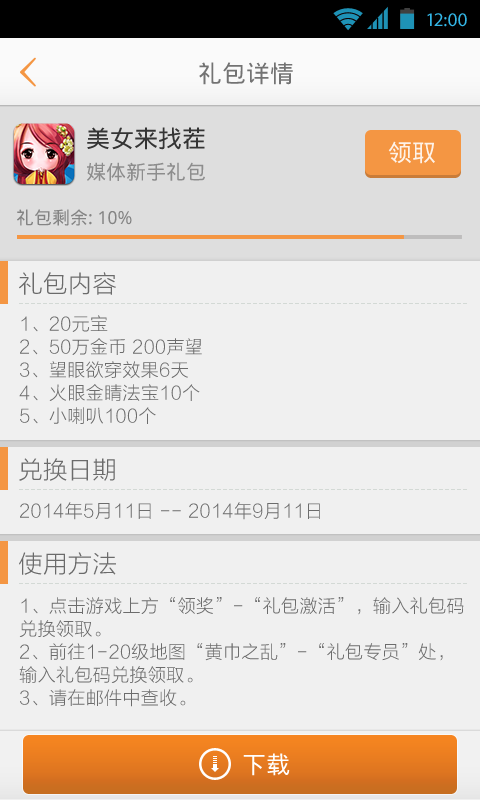
<style>
.page{position:relative;width:480px;height:800px;background:#f0f0f0}
.page>*{position:absolute;margin:0}
.t1{font:19.4px "MyriadPro-Regular";color:#33b5e5}
.t2{font:24px "DroidSansFallback";color:#737373}
.t3{font:24px "DroidSansFallback";color:#343434}
.t4{font:24px "DroidSansFallback";color:#fef2e8}
.t5{font:20px "DroidSansFallback";color:#8d8d8d}
.t6{font:18px "DroidSansFallback";color:#8e8e8e}
.t7{font:24px "STHeitiSC-Medium";color:#7a7a7a}
.t8{font:18px/23px "STHeitiSC-Medium";color:#6c6c6c}
.t9{font:24px "STHeitiSC-Medium";color:#6b6b6b}
.t10{font:18px "STHeitiSC-Medium";color:#6c6c6c}
.t11{font:24px "DroidSansFallback";color:#ffffff}
</style>
<div class="page">
<p class="t1" style="left:427px;top:13px;width:40px;height:14px">12:00</p>
<p class="t2" style="left:199px;top:62px;width:94px;height:23px">礼包详情</p>
<p class="t3" style="left:87px;top:127px;width:118px;height:23px">美女来找茬</p>
<p class="t4" style="left:388px;top:141px;width:47px;height:23px">领取</p>
<p class="t5" style="left:87px;top:162px;width:118px;height:19px">媒体新手礼包</p>
<p class="t6" style="left:17px;top:209px;width:115px;height:17px">礼包剩余: 10%</p>
<p class="t7" style="left:19px;top:272px;width:97px;height:23px">礼包内容</p>
<p class="t8" style="left:19px;top:315px;width:183px;height:109px">1、20元宝 <br>2、50万金币 200声望  <br>3、望眼欲穿效果6天<br>4、火眼金睛法宝10个<br>5、小喇叭100个</p>
<p class="t9" style="left:19px;top:458px;width:96px;height:23px">兑换日期</p>
<p class="t10" style="left:20px;top:502px;width:300px;height:18px">2014年5月11日 -- 2014年9月11日</p>
<p class="t9" style="left:19px;top:552px;width:97px;height:23px">使用方法</p>
<p class="t8" style="left:19px;top:597px;width:445px;height:110px">1、点击游戏上方“领奖”-“礼包激活”，输入礼包码<br>兑换领取。<br>2、前往1-20级地图“黄巾之乱”-“礼包专员”处，<br>输入礼包码兑换领取。<br>3、请在邮件中查收。</p>
<p class="t11" style="left:243px;top:753px;width:47px;height:23px">下载</p>
</div>
